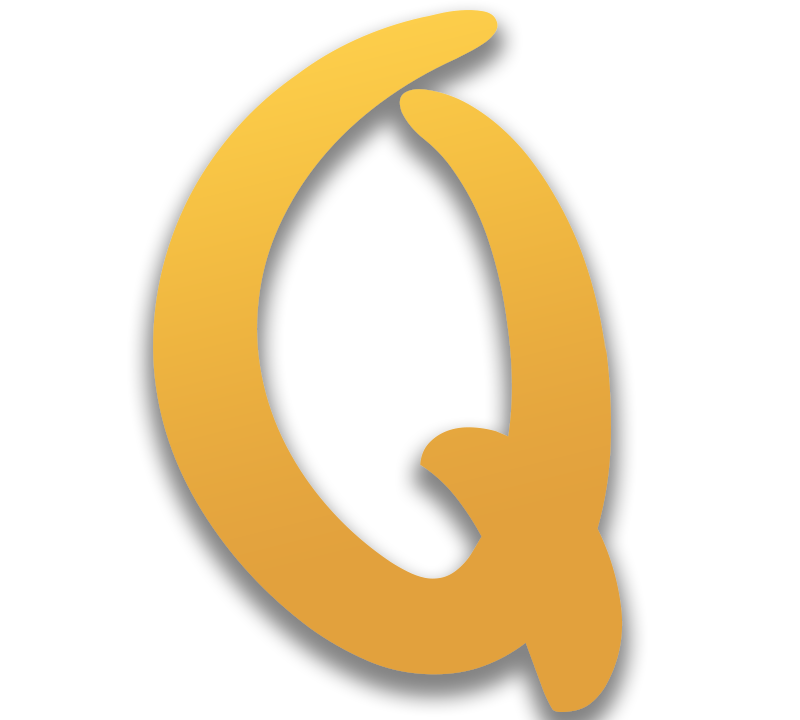
<style>
.page{position:relative;width:800px;height:720px;background:#ffffff}
.page>*{position:absolute;margin:0}
.t1{font:877.5px "kiwi";letter-spacing:0.025em;color:#e7a93f;scale:1.17 1}
</style>
<div class="page">
<p class="t1" style="left:153px;top:10px;width:470px;height:702px">Q</p>
</div>
